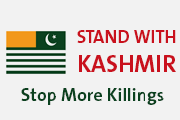
<style>
.page{position:relative;width:180px;height:120px;background:#f2f2f2}
.page>*{position:absolute;margin:0}
.t1{font:18px "TheSans-Bold";color:#c9111d}
.t2{font:24px "TheSans-Bold";color:#c9111d}
.t3{font:18px "TheSans-Bold";color:#0b411f}
</style>
<div class="page">
<p class="t1" style="left:77px;top:30px;width:99px;height:42px">STAND WITH <br><span class="t2">KASHMIR</span></p>
<p class="t3" style="left:21px;top:88px;width:143px;height:17px">Stop More Killings</p>
</div>
